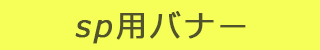
<style>
.page{position:relative;width:320px;height:50px;background:#f5ff57}
.page>*{position:absolute;margin:0}
.t1{font:30px "Meiryo-Italic";letter-spacing:0.1em;color:#51532d;font-weight:bold}
</style>
<div class="page">
<p class="t1" style="left:75px;top:11px;width:171px;height:33px">sp用バナー</p>
</div>
